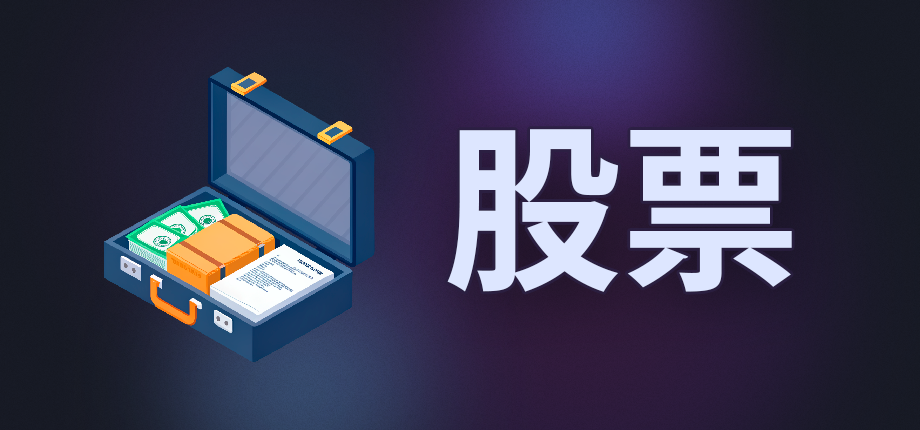
<style>
.page{position:relative;width:920px;height:430px}
.page>*{position:absolute;margin:0}
.t1{font:177.2px "KozGoPr6N-Bold";color:#dde6ff}
</style>
<div class="page">
<p class="t1" style="left:447px;top:129px;width:345px;height:163px">股票</p>
</div>
